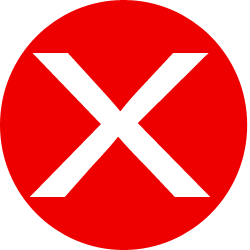
<style>
.page{position:relative;width:250px;height:250px;background:#ee0000}
.page>*{position:absolute;margin:0}
.t1{font:213.5px "MyriadPro-Regular";color:#ffffff;scale:1.62 1}
</style>
<div class="page">
<p class="t1" style="left:30px;top:53px;width:180px;height:144px">X</p>
</div>
